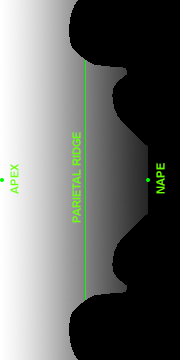
<style>
.page{position:relative;width:180px;height:360px;background:#000000}
.page>*{position:absolute;margin:0}
.t1{font:11px "Arial-BoldMT";color:#6cff00}
</style>
<div class="page">
<p class="t1" style="left:72px;top:132px;width:9px;height:91px;rotate:-90deg">PARIETAL RIDGE</p>
<p class="t1" style="left:10px;top:164px;width:9px;height:30px;rotate:-90deg">APEX</p>
<p class="t1" style="left:156px;top:163px;width:9px;height:31px;rotate:-90deg">NAPE</p>
</div>
